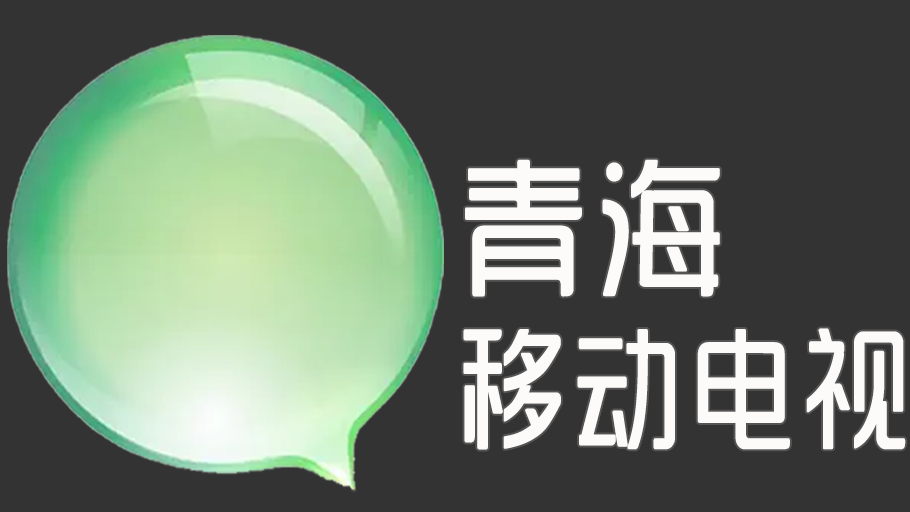
<style>
.page{position:relative;width:910px;height:512px;background:#333333}
.page>*{position:absolute;margin:0}
.t1{font:132px/170px "SJyunlvyuan";letter-spacing:0.02em;color:#fcfbf9;scale:0.85 1}
.t2{font:150px/170px "SJyunlvyuan";letter-spacing:0.02em;color:#fcfbf9;scale:0.9 1}
</style>
<div class="page">
<p class="t1" style="left:463px;top:159px;width:443px;height:291px"><span class="t2">青海<br></span>移动电视</p>
</div>
